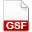
<style>
.page{position:relative;width:32px;height:32px;background:#ffffff}
.page>*{position:absolute;margin:0}
.t1{font:10px "ArialRoundedMTBold";color:#ffffff}
</style>
<div class="page">
<p class="t1" style="left:6px;top:22px;width:21px;height:7px">GSF</p>
</div>
